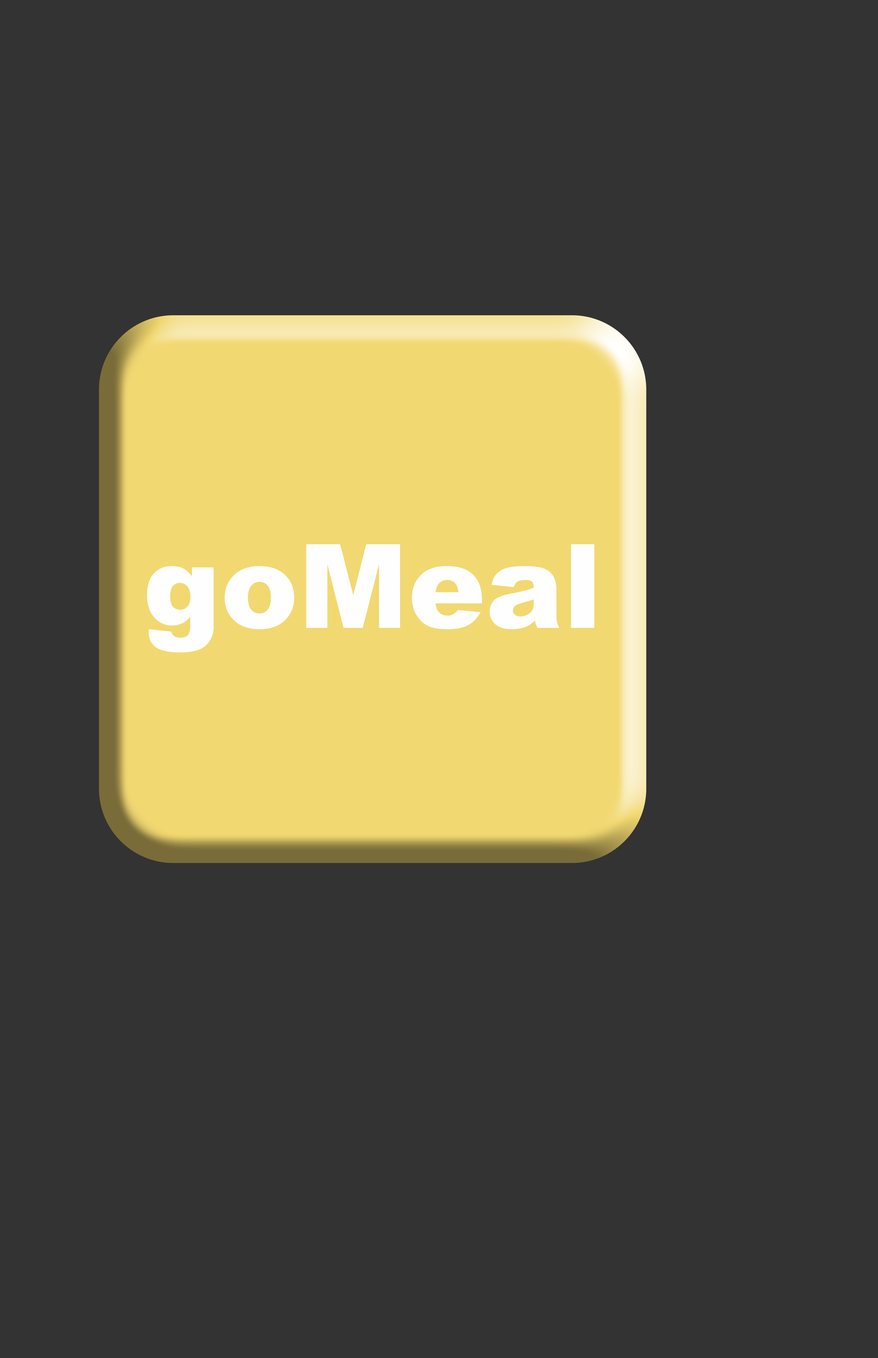
<style>
.page{position:relative;width:878px;height:1358px;background:#333333}
.page>*{position:absolute;margin:0}
.t1{font:116.5px "Arial-Black";color:#fefefe}
</style>
<div class="page">
<p class="t1" style="left:147px;top:544px;width:448px;height:108px">goMeal</p>
</div>
